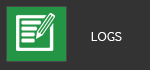
<style>
.page{position:relative;width:150px;height:70px;background:#333333}
.page>*{position:absolute;margin:0}
.t1{font:12px "EuphemiaCAS";color:#ffffff}
</style>
<div class="page">
<p class="t1" style="left:91px;top:32px;width:31px;height:9px">LOGS</p>
</div>
